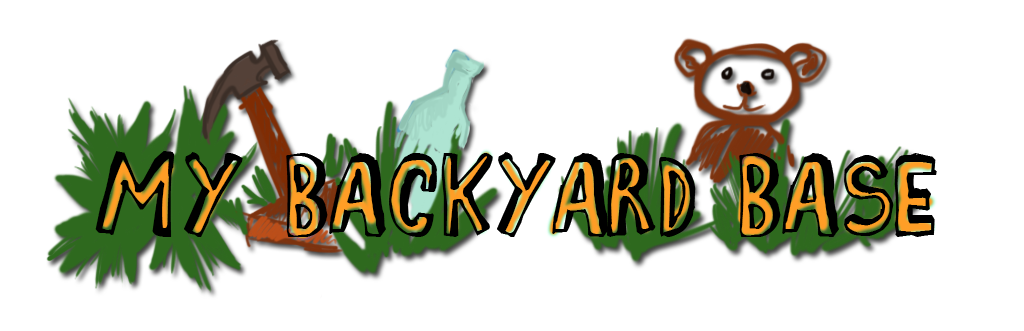
<style>
.page{position:relative;width:1024px;height:331px;background:#ffffff}
.page>*{position:absolute;margin:0}
.t1{font:99px "ComicZine";letter-spacing:-0.025em;color:#000000;scale:0.91 1}
.t2{font:99px "ComicZine";letter-spacing:-0.075em;color:#000000;scale:0.91 1}
</style>
<div class="page">
<p class="t1" style="left:95px;top:151px;width:842px;height:86px">My BAck<span class="t2">Ya</span>rd Base</p>
</div>
